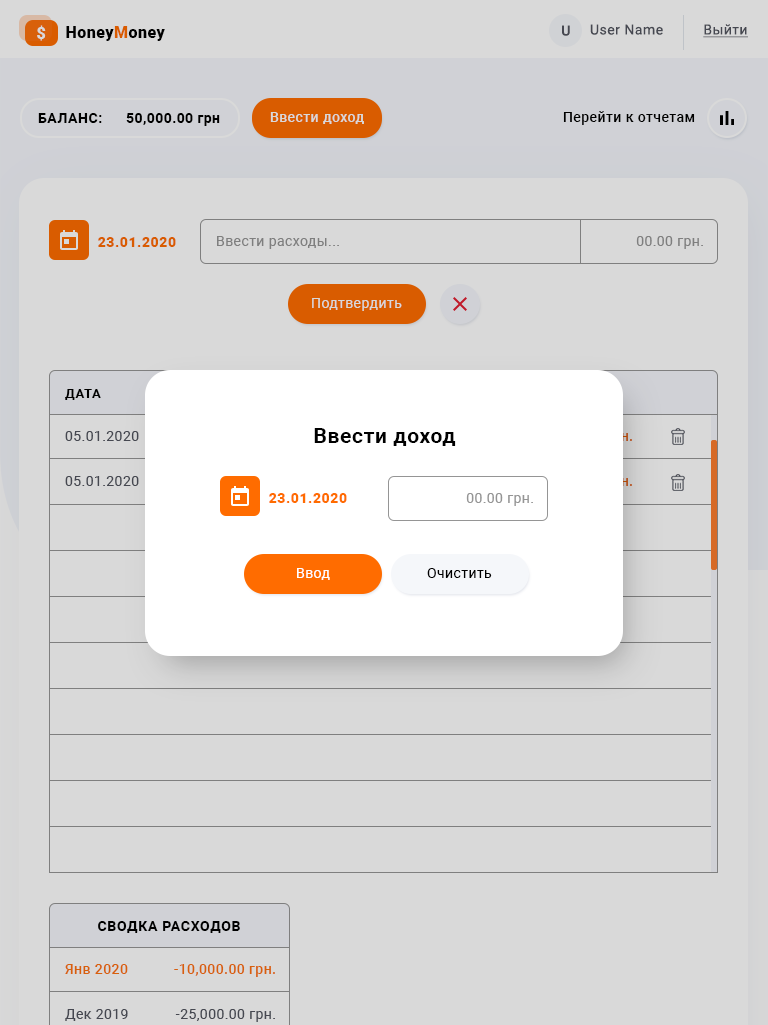
<style>
.page{position:relative;width:768px;height:1025px;background:#d9d9d9}
.page>*{position:absolute;margin:0}
.t1{font:16px "Roboto-Black";letter-spacing:0.03em;color:#d9d9d9}
.t2{font:16px "Roboto-Black";letter-spacing:0.03em;color:#000000}
.t3{font:16px "Roboto-Black";letter-spacing:0.03em;color:#ff6c00}
.t4{font:14px "Roboto-Medium";letter-spacing:0.035em;color:#52555f}
.t5{font:14px "Roboto-Regular";letter-spacing:0.035em;color:#52555f}
.t6{font:14px "Roboto-Regular";letter-spacing:0.03em;color:#52555f;text-decoration:underline}
.t7{font:14px "Roboto-Bold";letter-spacing:0.04em;color:#000000;text-transform:uppercase}
.t8{font:14px "Roboto-Bold";letter-spacing:0.03em;color:#000000}
.t9{font:14px "Roboto-Medium";letter-spacing:0.03em;color:#d9d9d9}
.t10{font:14px "Roboto-Medium";letter-spacing:0.03em;color:#000000}
.t11{font:14px "Roboto-Black";letter-spacing:0.04em;color:#d95c00}
.t12{font:14px "Roboto-Regular";letter-spacing:0.03em;color:#959595}
.t13{font:14px "Roboto-Regular";letter-spacing:0.03em;color:#d9d9d9}
.t14{font:13px "Roboto-Bold";letter-spacing:0.05em;color:#000000;text-transform:uppercase}
.t15{font:14px "Roboto-Regular";letter-spacing:0.03em;color:#52555f}
.t16{font:21px "Roboto-Bold";letter-spacing:0.03em;color:#000000}
.t17{font:14px "Roboto-Black";letter-spacing:0.04em;color:#ff6c00}
.t18{font:14px "Roboto-Regular";letter-spacing:0.03em;color:#ffffff}
.t19{font:14px "Roboto-Regular";letter-spacing:0.03em;color:#000000}
.t20{font:14px "Roboto-Bold";letter-spacing:0.05em;color:#000000;text-transform:uppercase}
.t21{font:14px "Roboto-Medium";letter-spacing:0.03em;color:#d8600b}
</style>
<div class="page">
<p class="t1" style="left:37px;top:25px;width:9px;height:16px">$</p>
<p class="t2" style="left:66px;top:26px;width:99px;height:15px">Honey<span class="t3">M</span>oney</p>
<p class="t4" style="left:562px;top:25px;width:8px;height:11px">U</p>
<p class="t5" style="left:590px;top:24px;width:73px;height:11px">User Name</p>
<p class="t6" style="left:703px;top:24px;width:45px;height:14px">Выйти</p>
<p class="t7" style="left:38px;top:113px;width:64px;height:10px">баланс:</p>
<p class="t8" style="left:126px;top:113px;width:94px;height:13px">50,000.00 грн</p>
<p class="t9" style="left:270px;top:112px;width:94px;height:12px">Ввести доход</p>
<p class="t10" style="left:563px;top:111px;width:132px;height:14px">Перейти к отчетам</p>
<p class="t11" style="left:98px;top:237px;width:78px;height:10px">23.01.2020</p>
<p class="t12" style="left:217px;top:236px;width:122px;height:13px">Ввести расходы...</p>
<p class="t12" style="left:636px;top:236px;width:67px;height:13px">00.00 грн.</p>
<p class="t13" style="left:312px;top:298px;width:90px;height:13px">Подтвердить</p>
<p class="t14" style="left:65px;top:389px;width:36px;height:11px">Дата</p>
<p class="t15" style="left:65px;top:431px;width:74px;height:10px">05.01.2020</p>
<p class="t16" style="left:314px;top:428px;width:142px;height:18px">Ввести доход</p>
<p class="t15" style="left:65px;top:476px;width:74px;height:10px">05.01.2020</p>
<p class="t17" style="left:269px;top:493px;width:78px;height:10px">23.01.2020</p>
<p class="t12" style="left:466px;top:493px;width:67px;height:13px">00.00 грн.</p>
<p class="t18" style="left:297px;top:568px;width:33px;height:12px">Ввод</p>
<p class="t19" style="left:427px;top:568px;width:65px;height:10px">Очистить</p>
<p class="t20" style="left:98px;top:921px;width:142px;height:12px">Сводка расходов</p>
<p class="t21" style="left:65px;top:964px;width:63px;height:10px">Янв 2020</p>
<p class="t21" style="left:174px;top:964px;width:101px;height:13px">-10,000.00 грн.</p>
<p class="t15" style="left:65px;top:1009px;width:63px;height:12px">Дек 2019</p>
<p class="t15" style="left:175px;top:1009px;width:100px;height:13px">-25,000.00 грн.</p>
</div>
